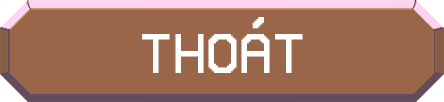
<style>
.page{position:relative;width:444px;height:102px;background:#996649}
.page>*{position:absolute;margin:0}
.t1{font:50px "SVN-Retron2000";color:#ffffff}
</style>
<div class="page">
<p class="t1" style="left:142px;top:17px;width:161px;height:56px">THOÁT</p>
</div>
